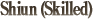
<style>
.page{position:relative;width:93px;height:19px;background:#ffffff}
.page>*{position:absolute;margin:0}
.t1{font:18px "RyuminPro-ExBold";letter-spacing:-0.08em;color:#4a3f32;font-weight:bold;scale:0.84 1}
</style>
<div class="page">
<p class="t1" style="left:0px;top:1px;width:93px;height:18px">Shiun (Skilled)</p>
</div>
